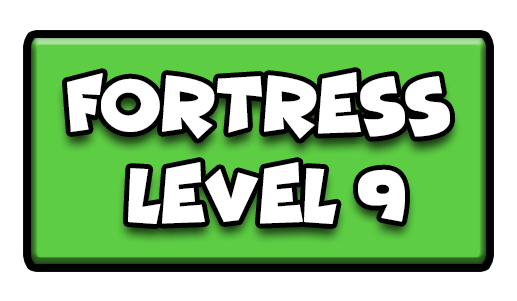
<style>
.page{position:relative;width:517px;height:301px;background:#ffffff}
.page>*{position:absolute;margin:0}
.t1{font:77.7px "Funhouse";color:#ffffff;scale:0.95 1}
</style>
<div class="page">
<p class="t1" style="left:67px;top:72px;width:383px;height:67px">FORTRESS</p>
<p class="t1" style="left:128px;top:162px;width:277px;height:62px">LEVEL 9</p>
</div>
